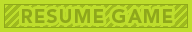
<style>
.page{position:relative;width:192px;height:32px;background:#bede2c}
.page>*{position:absolute;margin:0}
.t1{font:19px "AvenirLTStd-Black";letter-spacing:0.05em;color:#8fa81b;text-transform:uppercase}
</style>
<div class="page">
<p class="t1" style="left:22px;top:9px;width:151px;height:14px">Resume Game</p>
</div>
